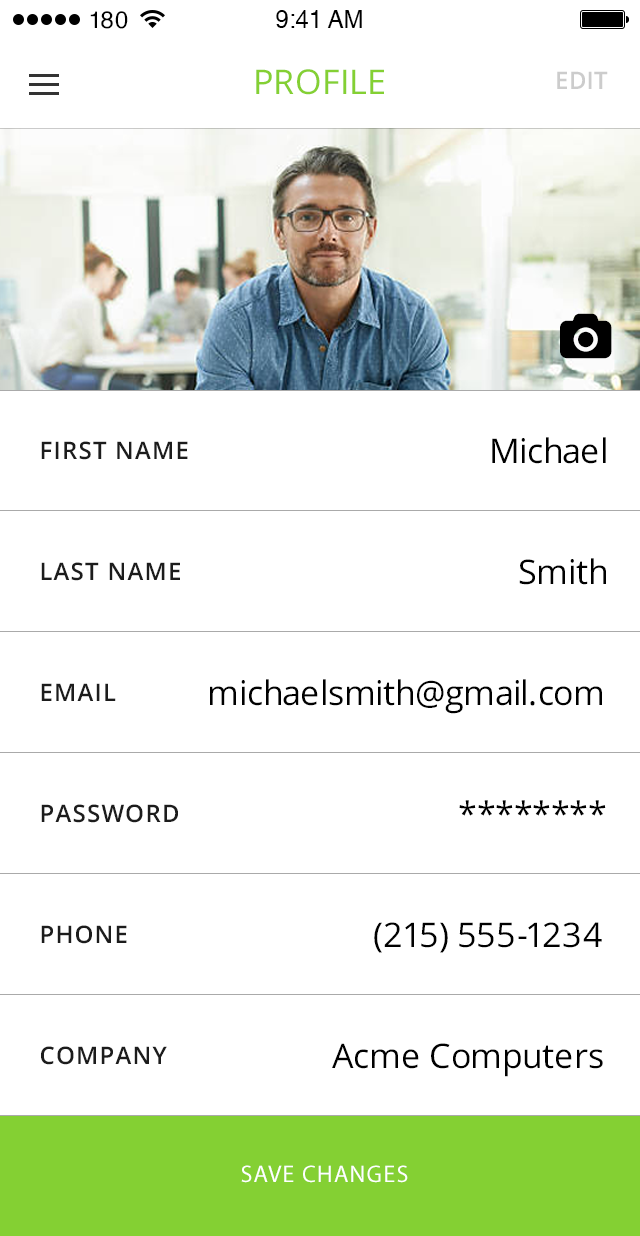
<style>
.page{position:relative;width:640px;height:1236px;background:#ffffff}
.page>*{position:absolute;margin:0}
.t1{font:34px "OpenSans";letter-spacing:0.01em;color:#84d033}
.t2{font:24px "OpenSans-Semibold";letter-spacing:0.01em;color:#cccccc}
.t3{font:34px "OpenSans";color:#000000}
.t4{font:24px "OpenSans-Semibold";letter-spacing:0.05em;color:#1c1c1c;text-transform:uppercase}
.t5{font:24px "MyriadPro-Regular";letter-spacing:0.05em;color:#ffffff;text-transform:uppercase}
</style>
<div class="page">
<p class="t1" style="left:256px;top:69px;width:128px;height:26px">PROFILE</p>
<p class="t2" style="left:557px;top:71px;width:51px;height:18px">EDIT</p>
<p class="t3" style="left:492px;top:437px;width:114px;height:27px">Michael</p>
<p class="t4" style="left:41px;top:441px;width:147px;height:19px">FIRST NAME</p>
<p class="t3" style="left:519px;top:558px;width:87px;height:27px">Smith</p>
<p class="t4" style="left:41px;top:562px;width:139px;height:19px">LAST NAME</p>
<p class="t4" style="left:41px;top:683px;width:75px;height:18px">EMAIL</p>
<p class="t3" style="left:210px;top:679px;width:392px;height:35px">michaelsmith@gmail.com</p>
<p class="t4" style="left:41px;top:804px;width:137px;height:19px">PASSWORD</p>
<p class="t3" style="left:459px;top:800px;width:147px;height:16px">********</p>
<p class="t4" style="left:41px;top:925px;width:86px;height:19px">PHONE</p>
<p class="t3" style="left:374px;top:922px;width:228px;height:31px">(215) 555-1234</p>
<p class="t4" style="left:41px;top:1046px;width:126px;height:19px">COMPANY</p>
<p class="t3" style="left:332px;top:1043px;width:271px;height:34px">Acme Computers</p>
<p class="t5" style="left:241px;top:1165px;width:167px;height:18px">SAVE CHANGES</p>
</div>
